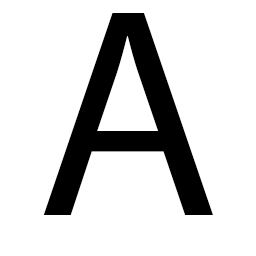
<style>
.page{position:relative;width:256px;height:256px;background:#ffffff}
.page>*{position:absolute;margin:0}
.t1{font:300px "MyriadPro-Regular";color:#000000}
</style>
<div class="page">
<p class="t1" style="left:43px;top:13px;width:170px;height:202px">A</p>
</div>
